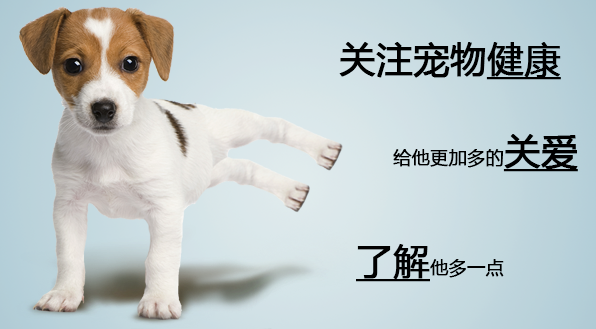
<style>
.page{position:relative;width:596px;height:329px}
.page>*{position:absolute;margin:0}
.t1{font:36px "MicrosoftYaHei";color:#000000;font-weight:bold}
.t2{font:36px "MicrosoftYaHei";color:#000000;font-weight:bold;text-decoration:underline}
.t3{font:18px "MicrosoftYaHei";color:#000000;font-weight:bold}
</style>
<div class="page">
<p class="t1" style="left:339px;top:42px;width:222px;height:38px">关注宠物<span class="t2">健康</span></p>
<p class="t3" style="left:393px;top:134px;width:185px;height:38px">给他更加多的<span class="t2">关爱</span></p>
<p class="t3" style="left:356px;top:244px;width:148px;height:38px"><span class="t2">了解</span>他多一点</p>
</div>
